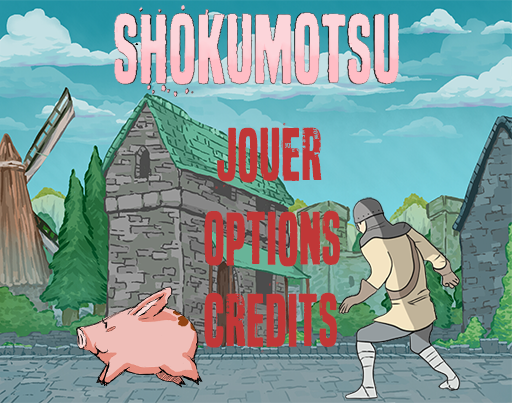
<style>
.page{position:relative;width:512px;height:403px}
.page>*{position:absolute;margin:0}
.t1{font:72px "Sevendeadlysins";color:#c03737}
</style>
<div class="page">
<p class="t1" style="left:215px;top:122px;width:107px;height:67px">Jouer</p>
<p class="t1" style="left:204px;top:210px;width:136px;height:57px">Options</p>
<p class="t1" style="left:204px;top:281px;width:133px;height:72px">CrEdits</p>
</div>
